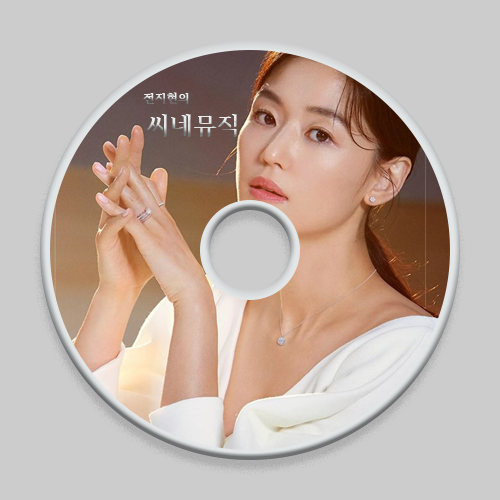
<style>
.page{position:relative;width:500px;height:500px;background:#cccccc}
.page>*{position:absolute;margin:0}
.t1{font:12px "HCRBatang-Bold";color:#e2e6e7}
.t2{font:24px "HCRBatang-Bold";color:#e2e6e7}
</style>
<div class="page">
<p class="t1" style="left:143px;top:92px;width:94px;height:45px">전지현의 <br> <span class="t2">씨네뮤직</span></p>
</div>
